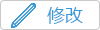
<style>
.page{position:relative;width:100px;height:30px;background:#ffffff}
.page>*{position:absolute;margin:0}
.t1{font:18px "MicrosoftYaHei";color:#3998d6}
</style>
<div class="page">
<p class="t1" style="left:47px;top:7px;width:36px;height:17px">修改</p>
</div>
